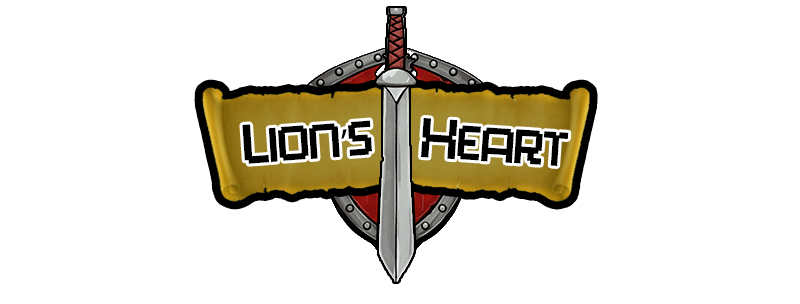
<style>
.page{position:relative;width:800px;height:304px;background:#ffffff}
.page>*{position:absolute;margin:0}
.t1{font:38.7px "PlayMeGamesReguler";color:#000000;scale:1.05 1}
.t2{font:44.7px "PlayMeGamesReguler";color:#000000;scale:1.05 1}
.t3{font:38.7px "MyriadPro-Regular";color:#000000;scale:1.05 1}
.t4{font:38.7px "PlayMeGamesReguler";color:#000000}
.t5{font:44.7px "PlayMeGamesReguler";color:#000000}
</style>
<div class="page">
<p class="t1" style="left:242px;top:120px;width:130px;height:44px;rotate:-4deg"><span class="t2">L</span>ioN<span class="t3">’</span>s</p>
<p class="t4" style="left:421px;top:118px;width:148px;height:48px;rotate:4deg"><span class="t5">H</span>eart</p>
</div>
